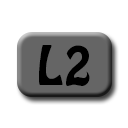
<style>
.page{position:relative;width:128px;height:128px;background:#ffffff}
.page>*{position:absolute;margin:0}
.t1{font:48px "HoboStd";color:#000000}
</style>
<div class="page">
<p class="t1" style="left:39px;top:45px;width:51px;height:41px">L2</p>
</div>
